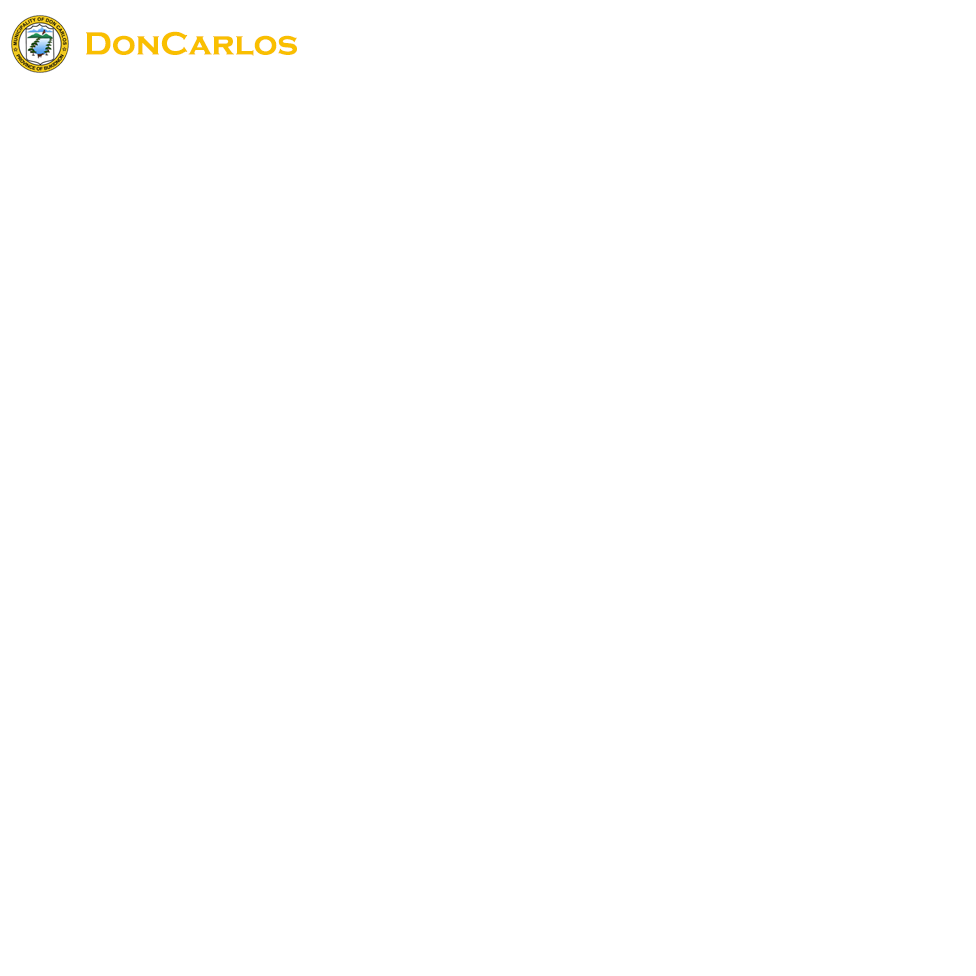
<style>
.page{position:relative;width:976px;height:976px;background:#ffffff}
.page>*{position:absolute;margin:0}
.t1{font:33.3px "CopperplateGothic-Bold";color:#f9bf00}
</style>
<div class="page">
<p class="t1" style="left:86px;top:31px;width:211px;height:25px">DonCarlos</p>
</div>
